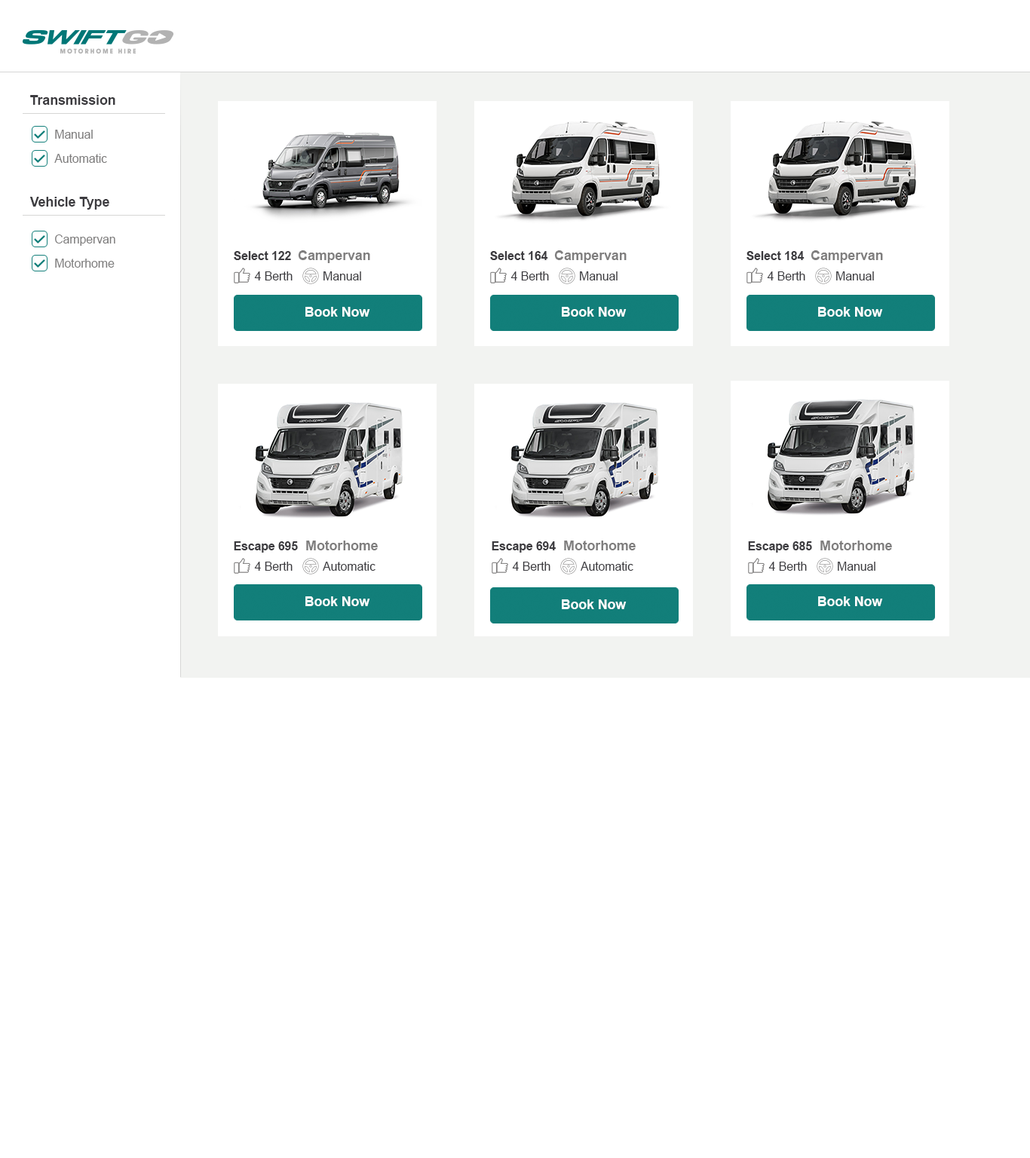
<style>
.page{position:relative;width:1030px;height:1158px;background:#ffffff}
.page>*{position:absolute;margin:0}
.t1{font:13.6px "Arial-BoldMT";letter-spacing:-0.01em;color:#3c3b3f}
.t2{font:12.1px "ArialMT";letter-spacing:-0.01em;color:#7f7e7e}
.t3{font:12.1px "Arial-BoldMT";letter-spacing:-0.01em;color:#3c3b3f}
.t4{font:13.6px "Arial-BoldMT";letter-spacing:-0.01em;color:#7f7e7e}
.t5{font:12.1px "ArialMT";letter-spacing:-0.01em;color:#3c3b3f}
.t6{font:13.6px "Arial-BoldMT";letter-spacing:-0.01em;color:#ffffff}
</style>
<div class="page">
<p class="t1" style="left:30px;top:95px;width:85px;height:10px">Transmission</p>
<p class="t2" style="left:55px;top:130px;width:38px;height:9px">Manual</p>
<p class="t2" style="left:54px;top:154px;width:53px;height:9px">Automatic</p>
<p class="t1" style="left:29px;top:197px;width:80px;height:13px">Vehicle Type</p>
<p class="t2" style="left:55px;top:234px;width:60px;height:12px">Campervan</p>
<p class="t3" style="left:234px;top:251px;width:57px;height:9px">Select 122</p>
<p class="t4" style="left:298px;top:250px;width:72px;height:13px">Campervan</p>
<p class="t3" style="left:490px;top:251px;width:58px;height:9px">Select 164</p>
<p class="t4" style="left:554px;top:250px;width:72px;height:13px">Campervan</p>
<p class="t3" style="left:746px;top:251px;width:58px;height:9px">Select 184</p>
<p class="t4" style="left:810px;top:250px;width:73px;height:13px">Campervan</p>
<p class="t2" style="left:55px;top:259px;width:60px;height:9px">Motorhome</p>
<p class="t5" style="left:254px;top:271px;width:39px;height:9px">4 Berth</p>
<p class="t5" style="left:323px;top:271px;width:38px;height:9px">Manual</p>
<p class="t5" style="left:510px;top:271px;width:39px;height:9px">4 Berth</p>
<p class="t5" style="left:580px;top:271px;width:37px;height:9px">Manual</p>
<p class="t5" style="left:767px;top:271px;width:38px;height:9px">4 Berth</p>
<p class="t5" style="left:836px;top:271px;width:38px;height:9px">Manual</p>
<p class="t6" style="left:305px;top:307px;width:65px;height:10px">Book Now</p>
<p class="t6" style="left:562px;top:307px;width:64px;height:10px">Book Now</p>
<p class="t6" style="left:818px;top:307px;width:65px;height:10px">Book Now</p>
<p class="t3" style="left:234px;top:541px;width:64px;height:12px">Escape 695</p>
<p class="t4" style="left:306px;top:541px;width:72px;height:9px">Motorhome</p>
<p class="t3" style="left:492px;top:541px;width:64px;height:12px">Escape 694</p>
<p class="t4" style="left:564px;top:541px;width:72px;height:9px">Motorhome</p>
<p class="t3" style="left:748px;top:541px;width:64px;height:12px">Escape 685</p>
<p class="t4" style="left:820px;top:541px;width:72px;height:9px">Motorhome</p>
<p class="t5" style="left:254px;top:562px;width:39px;height:9px">4 Berth</p>
<p class="t5" style="left:323px;top:562px;width:52px;height:9px">Automatic</p>
<p class="t5" style="left:512px;top:562px;width:38px;height:9px">4 Berth</p>
<p class="t5" style="left:580px;top:562px;width:53px;height:9px">Automatic</p>
<p class="t5" style="left:768px;top:562px;width:39px;height:9px">4 Berth</p>
<p class="t5" style="left:838px;top:562px;width:37px;height:9px">Manual</p>
<p class="t6" style="left:305px;top:596px;width:65px;height:10px">Book Now</p>
<p class="t6" style="left:562px;top:599px;width:64px;height:10px">Book Now</p>
<p class="t6" style="left:818px;top:596px;width:65px;height:10px">Book Now</p>
</div>
